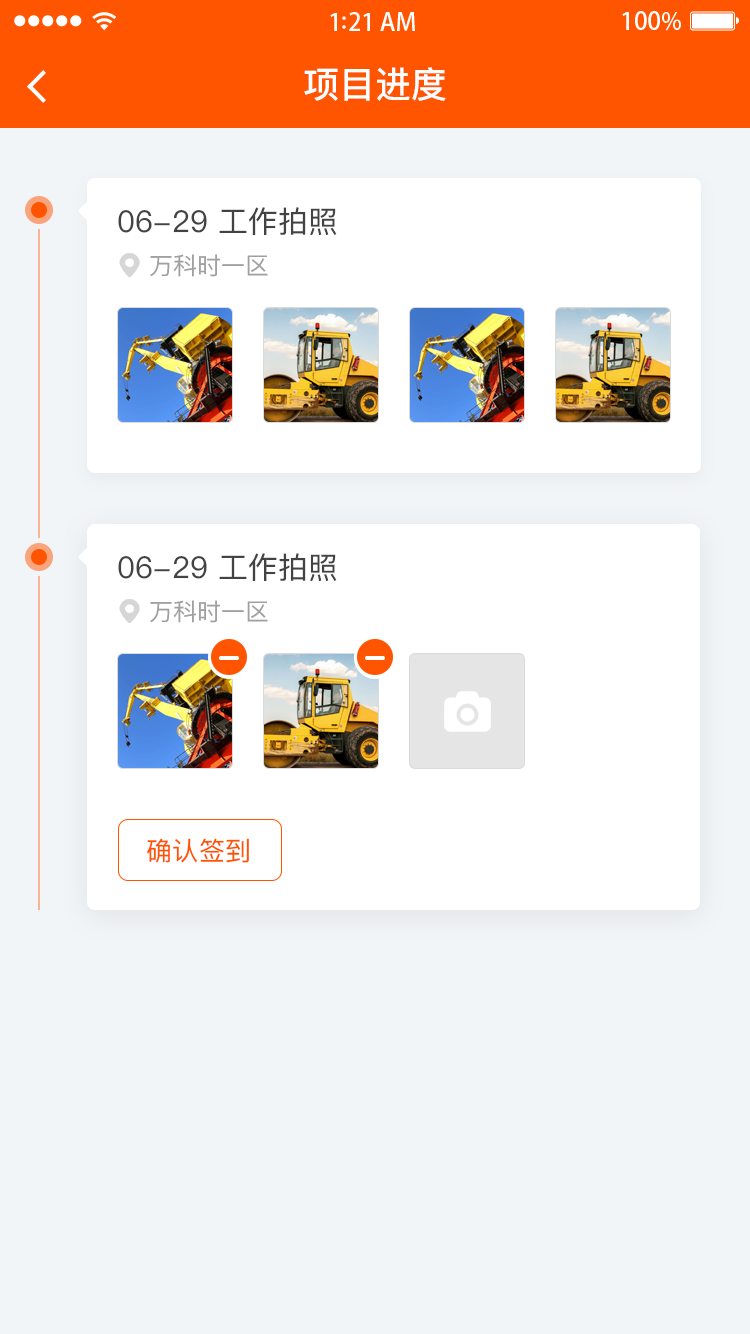
<style>
.page{position:relative;width:750px;height:1334px;background:#f2f5f7}
.page>*{position:absolute;margin:0}
.t1{font:36px "PingFangSC-Medium";color:#ffffff}
.t2{font:30px "PingFangSC-Regular";color:#434343}
.t3{font:24px "PingFangSC-Regular";color:#a0a0a0}
.t4{font:26px "PingFangSC-Regular";letter-spacing:0.02em;color:#ff5400}
</style>
<div class="page">
<p class="t1" style="left:304px;top:67px;width:142px;height:34px">项目进度</p>
<p class="t2" style="left:118px;top:207px;width:219px;height:29px">06-29 工作拍照</p>
<p class="t3" style="left:150px;top:254px;width:118px;height:23px">万科时一区</p>
<p class="t2" style="left:118px;top:553px;width:219px;height:29px">06-29 工作拍照</p>
<p class="t3" style="left:150px;top:600px;width:118px;height:23px">万科时一区</p>
<p class="t4" style="left:147px;top:838px;width:102px;height:25px">确认签到</p>
</div>
